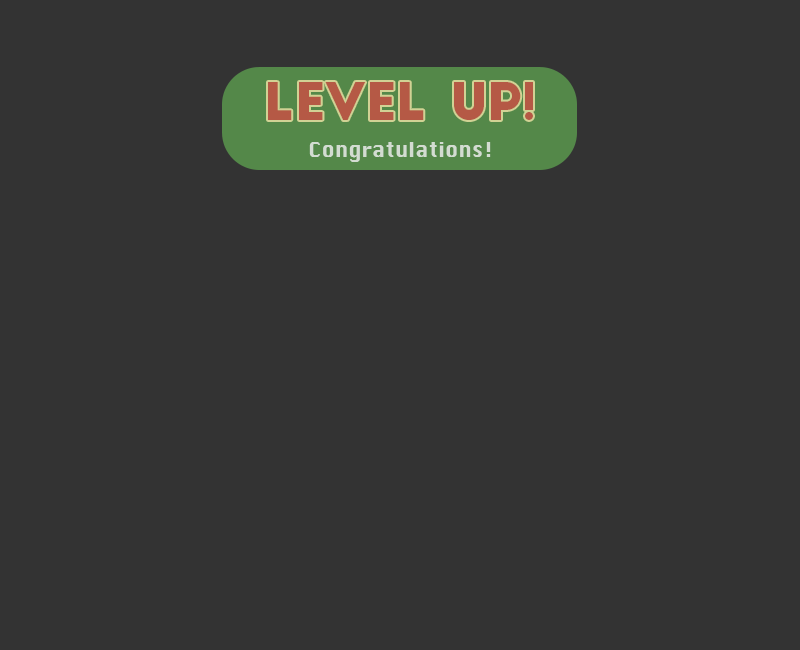
<style>
.page{position:relative;width:800px;height:650px;background:#333333}
.page>*{position:absolute;margin:0}
.t1{font:50.2px "BigJohn";color:#b55945}
.t2{font:20px "Krungthep";color:#d3dcd1}
</style>
<div class="page">
<p class="t1" style="left:268px;top:82px;width:265px;height:38px">LEVEL UP!</p>
<p class="t2" style="left:309px;top:142px;width:182px;height:20px">Congratulations!</p>
</div>
